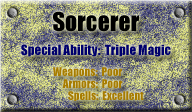
<style>
.page{position:relative;width:192px;height:112px}
.page>*{position:absolute;margin:0}
.t1{font:24px "Impact";color:#000000}
.t2{font:13px "Impact";color:#00006d}
.t3{font:11px "Impact";color:#a77c00}
</style>
<div class="page">
<p class="t1" style="left:53px;top:11px;width:86px;height:21px">Sorcerer</p>
<p class="t2" style="left:21px;top:44px;width:150px;height:13px">Special Ability:  Triple Magic</p>
<p class="t3" style="left:53px;top:67px;width:69px;height:10px">Weapons:  Poor</p>
<p class="t3" style="left:62px;top:79px;width:61px;height:9px">Armors:  Poor</p>
<p class="t3" style="left:68px;top:91px;width:76px;height:10px">Spells:  Excellent</p>
</div>
